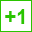
<style>
.page{position:relative;width:32px;height:32px;background:#ffffff}
.page>*{position:absolute;margin:0}
.t1{font:20px "Arial-BoldMT";color:#2ac400}
</style>
<div class="page">
<p class="t1" style="left:5px;top:9px;width:20px;height:15px">+1</p>
</div>
